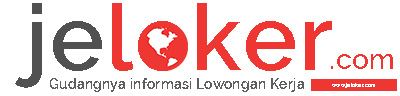
<style>
.page{position:relative;width:400px;height:96px;background:#ffffff}
.page>*{position:absolute;margin:0}
.t1{font:90.9px "Raleway-SemiBold";letter-spacing:0.025em;color:#ee3733}
.t2{font:90.9px "Raleway-SemiBold";letter-spacing:0.025em;color:#515151}
.t3{font:28.4px "Raleway-Medium";letter-spacing:0.025em;color:#ee3733}
.t4{font:13.6px "Raleway-SemiBold";letter-spacing:0.025em;color:#5e5e5e}
.t5{font:5.1px "Raleway-SemiBold";letter-spacing:0.025em;color:#ffffff}
</style>
<div class="page">
<p class="t1" style="left:15px;top:3px;width:317px;height:85px"><span class="t2">je</span>loker</p>
<p class="t3" style="left:331px;top:54px;width:62px;height:15px">.com</p>
<p class="t4" style="left:50px;top:78px;width:254px;height:14px">Gudangnya informasi Lowongan Kerja</p>
<p class="t5" style="left:332px;top:83px;width:43px;height:5px">www.jeloker.com</p>
</div>
